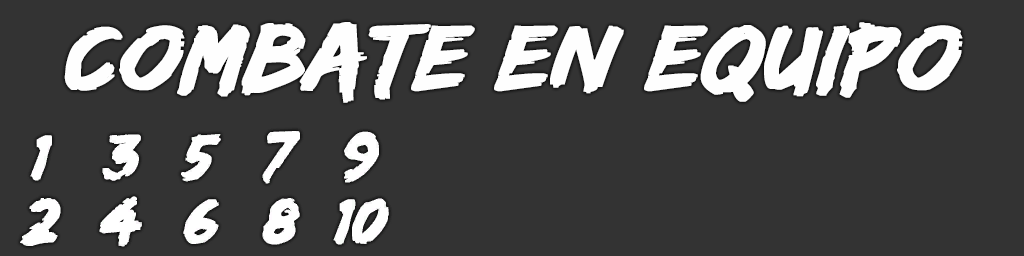
<style>
.page{position:relative;width:1024px;height:256px;background:#333333}
.page>*{position:absolute;margin:0}
.t1{font:96px "EdoSZ";color:#fefefe;font-weight:bold;font-style:italic;scale:1.04 1}
</style>
<div class="page">
<p class="t1" style="left:64px;top:22px;width:899px;height:81px">combate en equipo</p>
</div>
